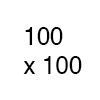
<style>
.page{position:relative;width:100px;height:100px;background:#ffffff}
.page>*{position:absolute;margin:0}
.t1{font:24px "Helvetica";color:#000000}
</style>
<div class="page">
<p class="t1" style="left:23px;top:27px;width:59px;height:47px">100<br>x 100</p>
</div>
